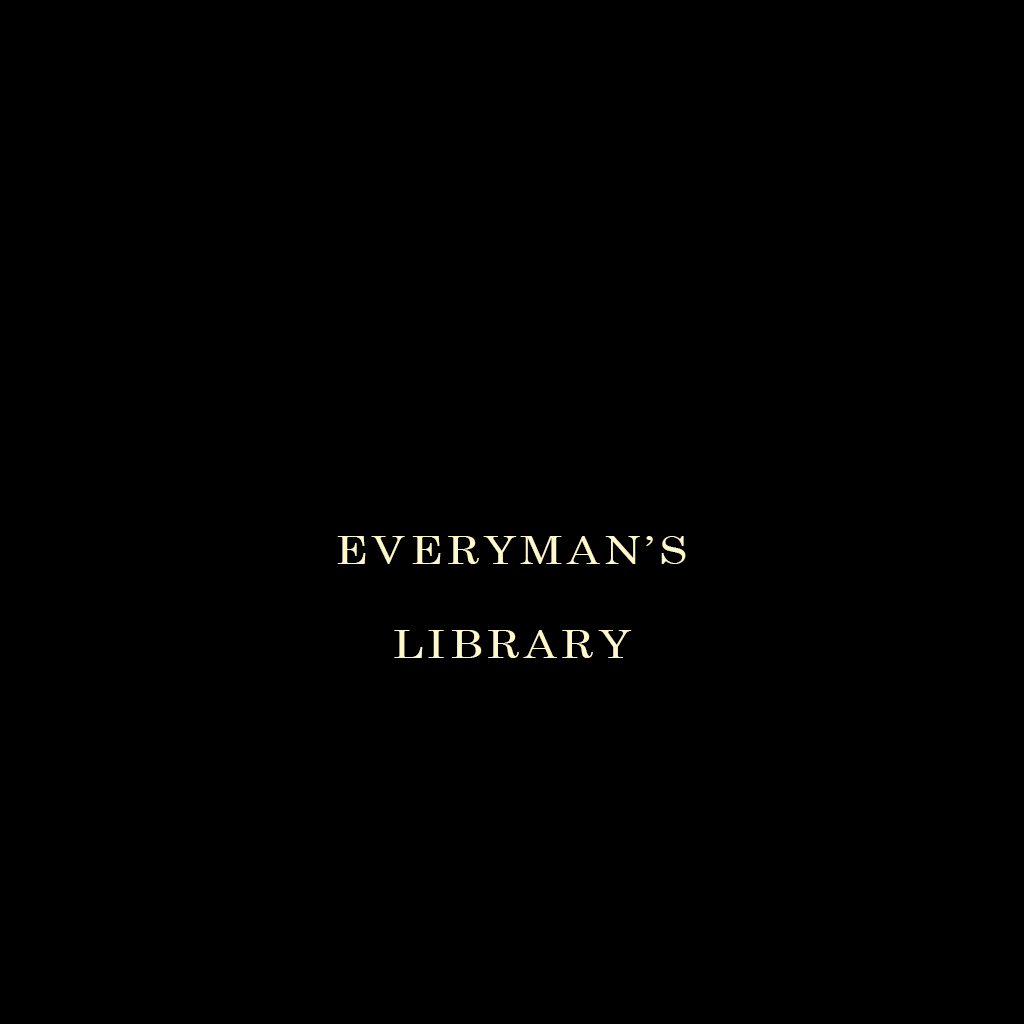
<style>
.page{position:relative;width:1024px;height:1024px;background:#000000}
.page>*{position:absolute;margin:0}
.t1{font:38.9px/94px "Century";letter-spacing:0.1em;color:#fff8cb;scale:1.16 1}
</style>
<div class="page">
<p class="t1" style="left:337px;top:536px;width:349px;height:122px;text-align:center">EVERYMAN’S<br>LIBRARY</p>
</div>
